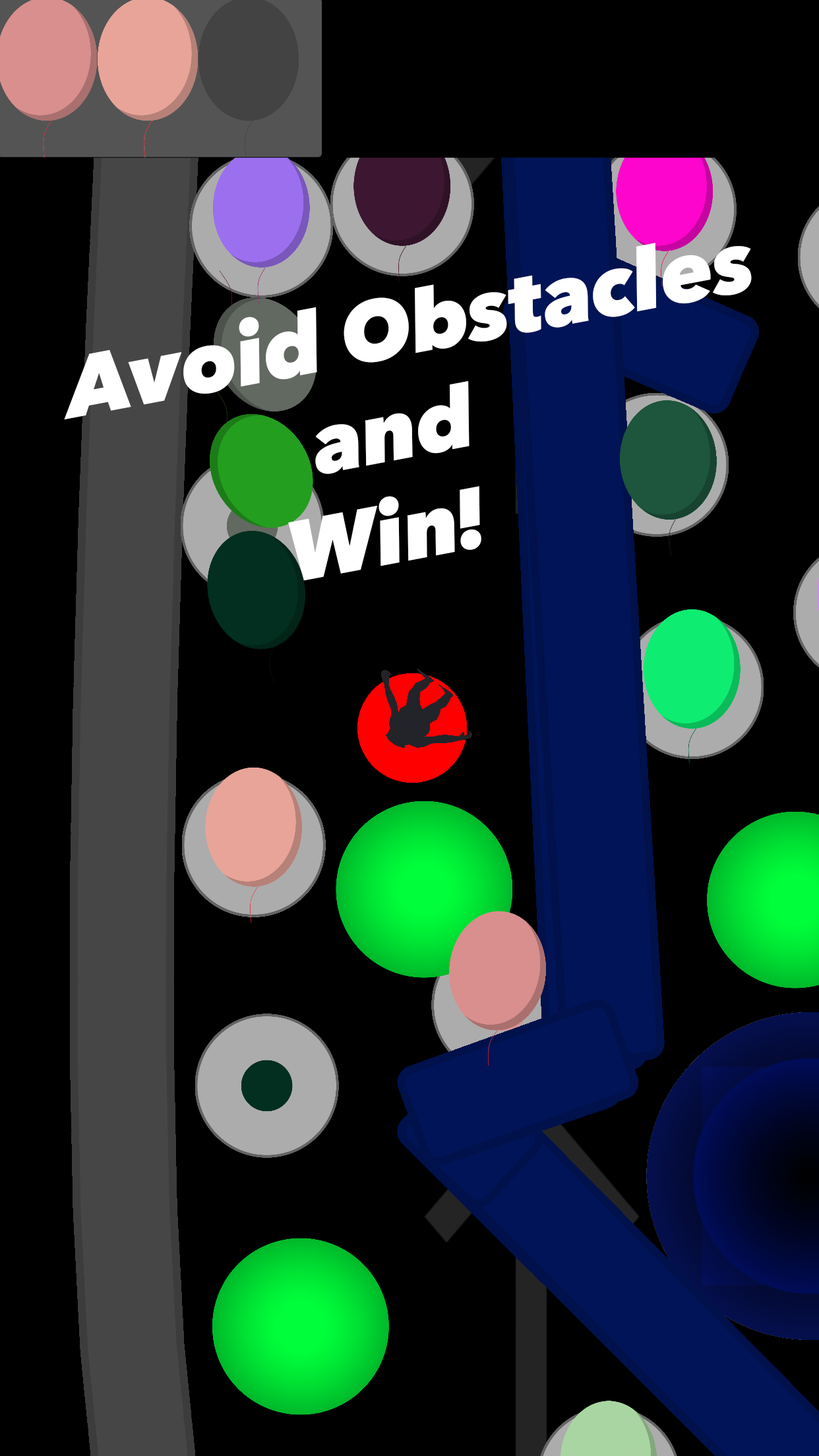
<style>
.page{position:relative;width:819px;height:1456px;background:#000000}
.page>*{position:absolute;margin:0}
.t1{font:84.4px "AvenirNext-HeavyItalic";color:#ffffff}
</style>
<div class="page">
<p class="t1" style="left:64px;top:243px;width:688px;height:338px;rotate:-11deg">Avoid Obstacles<br>           and <br>         Win!</p>
</div>
